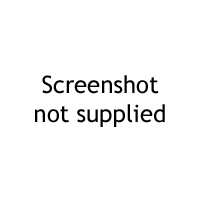
<style>
.page{position:relative;width:200px;height:200px;background:#ffffff}
.page>*{position:absolute;margin:0}
.t1{font:24px "TrebuchetMS";color:#000000}
</style>
<div class="page">
<p class="t1" style="left:35px;top:75px;width:130px;height:52px;text-align:center">Screenshot<br>not supplied</p>
</div>
